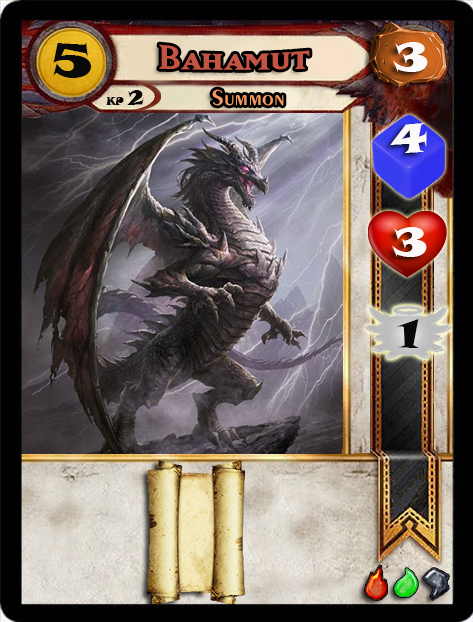
<style>
.page{position:relative;width:473px;height:622px}
.page>*{position:absolute;margin:0}
.t1{font:46.6px "SnapITC-Regular";color:#090909;scale:1.05 1}
.t2{font:40px "MatrixBoldSmallCaps";color:#c25443;scale:1.06 1}
.t3{font:40px "SnapITC-Regular";color:#fef9f9;scale:1.05 1}
.t4{font:22.7px "Exotic350BT-DemiBold";color:#f89c64;scale:1.06 1}
.t5{font:20.5px "SnapITC-Regular";color:#090909}
.t6{font:40px "SnapITC-Regular";color:#090909;scale:1.05 1}
</style>
<div class="page">
<p class="t1" style="left:53px;top:42px;width:38px;height:36px">5</p>
<p class="t2" style="left:159px;top:44px;width:151px;height:26px">Bahamut</p>
<p class="t3" style="left:393px;top:42px;width:35px;height:30px">3</p>
<p class="t4" style="left:212px;top:89px;width:72px;height:17px">Summon</p>
<p class="t5" style="left:127px;top:90px;width:17px;height:15px">2</p>
<p class="t3" style="left:390px;top:123px;width:37px;height:30px">4</p>
<p class="t3" style="left:392px;top:227px;width:35px;height:30px">3</p>
<p class="t6" style="left:397px;top:319px;width:22px;height:29px">1</p>
</div>
